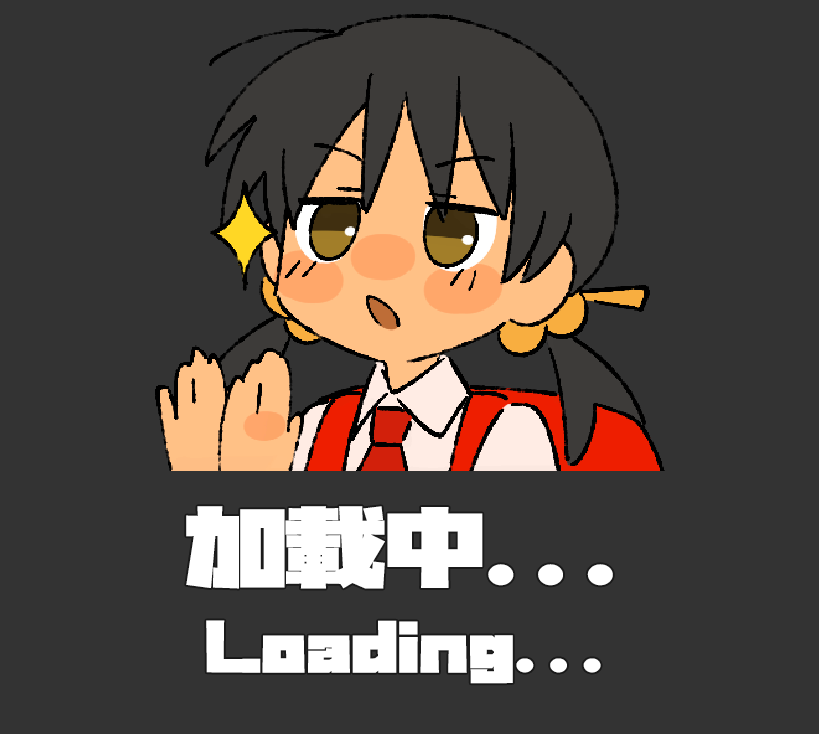
<style>
.page{position:relative;width:819px;height:734px;background:#333333}
.page>*{position:absolute;margin:0}
.t1{font:56px/113px "GN-KMBFont-UB-NewstyleKanaA";color:#ffffff;scale:1.2 1}
.t2{font:83px/113px "GN-KMBFont-UB-NewstyleKanaA";color:#ffffff;scale:1.2 1}
</style>
<div class="page">
<p class="t1" style="left:186px;top:506px;width:427px;height:178px;text-align:center"><span class="t2">加載中...<br></span>Loading...</p>
</div>
